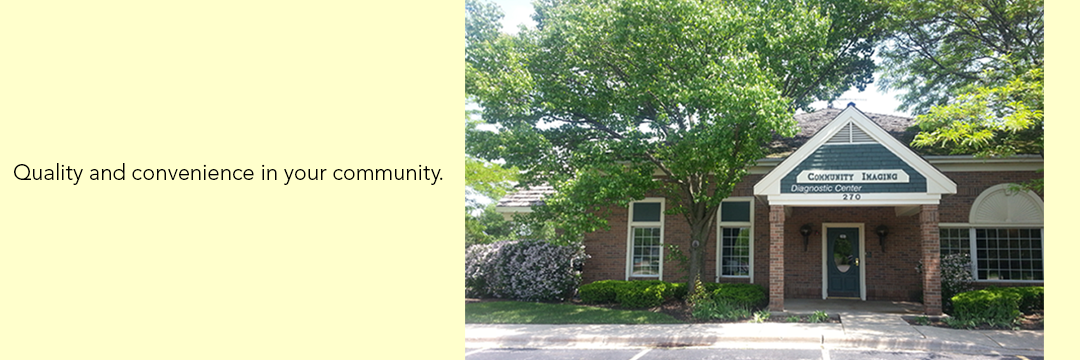
<style>
.page{position:relative;width:1080px;height:360px;background:#ffffcc}
.page>*{position:absolute;margin:0}
.t1{font:22px "AvenirLTStd-Light";color:#000000}
</style>
<div class="page">
<p class="t1" style="left:14px;top:163px;width:429px;height:22px">Quality and convenience in your community.</p>
</div>
